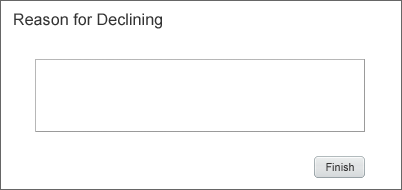
<style>
.page{position:relative;width:402px;height:190px;background:#ffffff}
.page>*{position:absolute;margin:0}
.t1{font:16px "ArialMT";letter-spacing:0.005em;color:#333333}
.t2{font:11px "ArialMT";color:#303030}
</style>
<div class="page">
<p class="t1" style="left:14px;top:13px;width:148px;height:16px">Reason for Declining</p>
<p class="t2" style="left:326px;top:163px;width:28px;height:8px">Finish</p>
</div>
